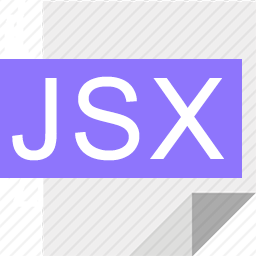
<style>
.page{position:relative;width:256px;height:256px;background:#8e75fc}
.page>*{position:absolute;margin:0}
.t1{font:113px "ArialMT";letter-spacing:0.04em;color:#ffffff}
</style>
<div class="page">
<p class="t1" style="left:12px;top:76px;width:212px;height:85px">JSX</p>
</div>
